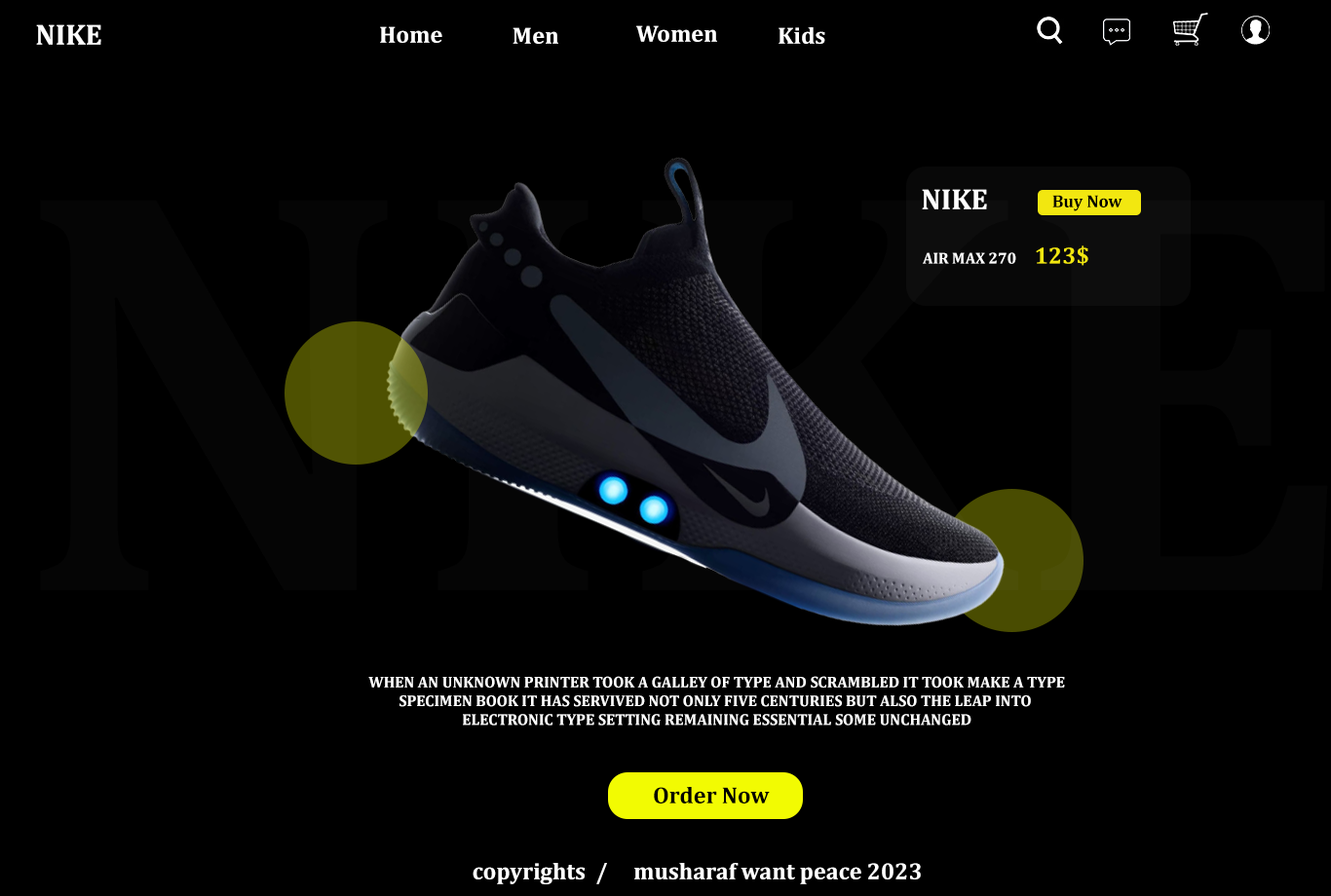
<style>
.page{position:relative;width:1331px;height:896px;background:#000000}
.page>*{position:absolute;margin:0}
.t1{font:29.2px "Cambria-Bold";color:#ffffff}
.t2{font:23.4px "Cambria-Bold";color:#ffffff}
.t3{font:17.5px "Cambria-Bold";color:#000000}
.t4{font:15.6px "Cambria-Bold";color:#ffffff}
.t5{font:23.4px "Cambria-Bold";color:#f2e710}
.t6{font:23.4px "Cambria-Bold";color:#000000}
</style>
<div class="page">
<p class="t1" style="left:36px;top:24px;width:65px;height:21px">NIKE</p>
<p class="t2" style="left:380px;top:26px;width:62px;height:17px">Home</p>
<p class="t2" style="left:512px;top:27px;width:46px;height:17px">Men</p>
<p class="t2" style="left:636px;top:25px;width:81px;height:17px">Women</p>
<p class="t2" style="left:778px;top:27px;width:47px;height:17px">Kids</p>
<p class="t1" style="left:921px;top:189px;width:66px;height:20px">NIKE</p>
<p class="t3" style="left:1052px;top:195px;width:70px;height:16px">Buy Now</p>
<p class="t4" style="left:922px;top:245px;width:166px;height:21px">AIR MAX 270      <span class="t5">123$</span></p>
<p class="t4" style="left:368px;top:676px;width:697px;height:50px;text-align:center">WHEN AN UNKNOWN PRINTER TOOK A GALLEY OF TYPE AND SCRAMBLED IT TOOK MAKE A TYPE<br>SPECIMEN BOOK IT HAS SERVIVED NOT ONLY FIVE CENTURIES BUT ALSO THE LEAP INTO <br>ELECTRONIC TYPE SETTING REMAINING ESSENTIAL SOME UNCHANGED</p>
<p class="t6" style="left:654px;top:787px;width:116px;height:17px">Order Now</p>
<p class="t2" style="left:472px;top:863px;width:449px;height:21px">copyrights  /     musharaf want peace 2023</p>
</div>
